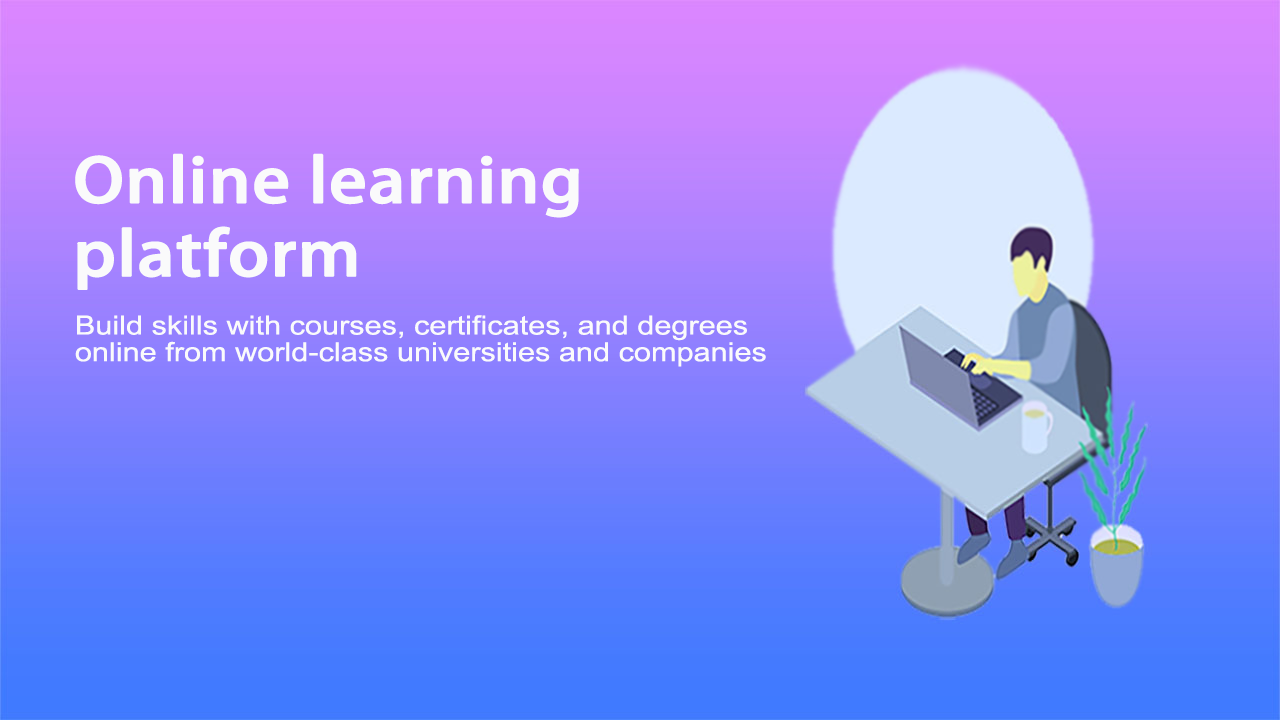
<style>
.page{position:relative;width:1280px;height:720px}
.page>*{position:absolute;margin:0}
.t1{font:59.4px/73.3px "AdobeHeitiStd-Regular";color:#fafafb;font-weight:bold;scale:1.16 1}
.t2{font:26.4px/26.7px "ArialMT";color:#fafafb;scale:1.16 1}
</style>
<div class="page">
<p class="t1" style="left:75px;top:153px;width:504px;height:137px">Online learning<br>platform</p>
<p class="t2" style="left:75px;top:315px;width:691px;height:52px">Build skills with courses, certificates, and degrees<br>online from world-class universities and companies</p>
</div>
